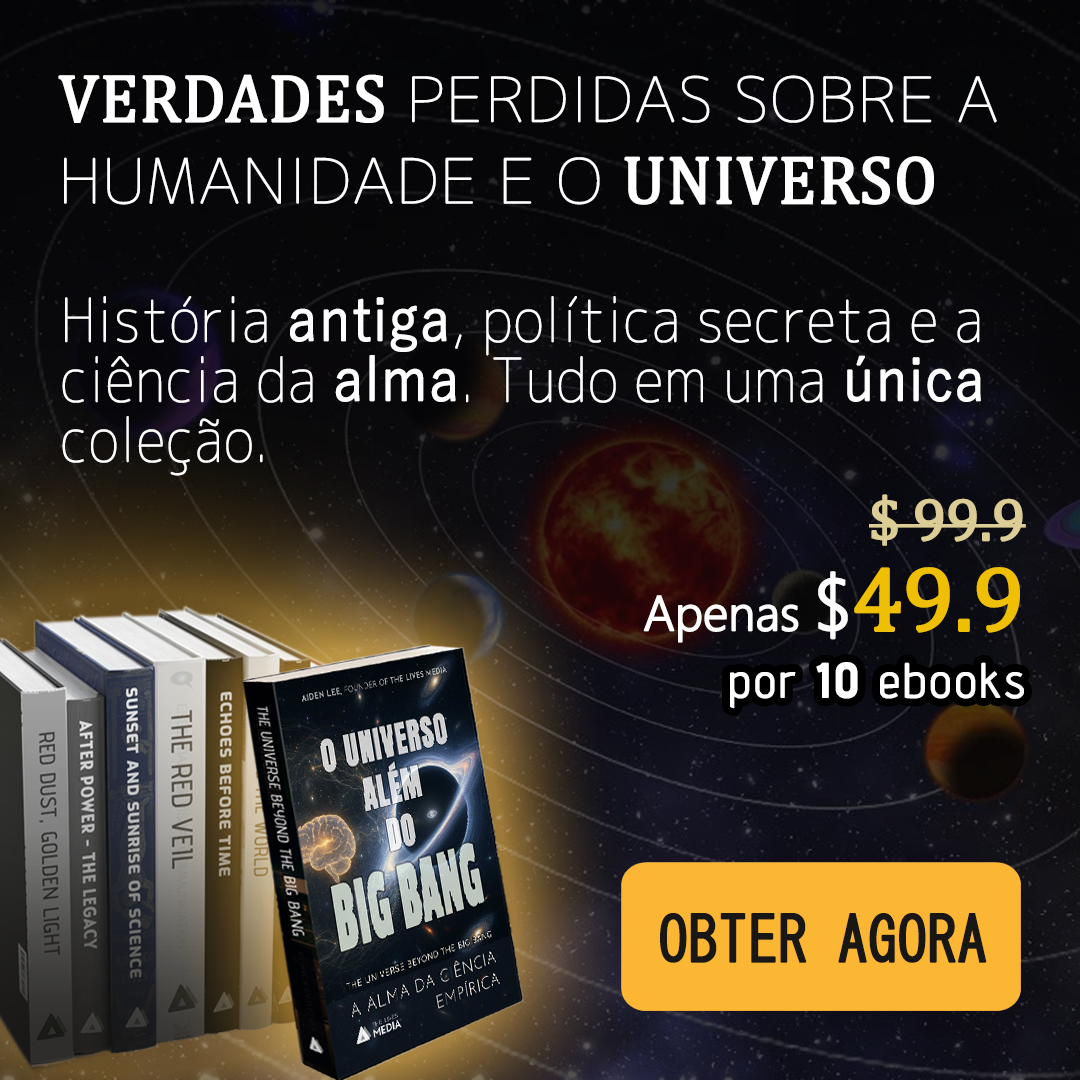
<style>
.page{position:relative;width:1080px;height:1080px}
.page>*{position:absolute;margin:0}
.t1{font:61.2px "Chogokuboso-Gothic";letter-spacing:0.005em;color:#ffffff;font-weight:bold;scale:1.07 1}
.t2{font:68px "Cambria";letter-spacing:0.005em;color:#ffffff;font-weight:bold;scale:0.96 1}
.t3{font:60px/60px "Chogokuboso-Gothic";letter-spacing:0.005em;color:#ffffff;font-weight:bold;scale:0.9 1}
.t4{font:60px/60px "YuGothic-Regular";letter-spacing:0.005em;color:#ffffff;font-weight:bold;scale:0.9 1}
.t5{font:60px "Cambria";letter-spacing:-0.025em;color:#dbcd95;font-weight:bold}
.t6{font:60px "Cambria";letter-spacing:-0.025em;color:#efbf04;font-weight:bold}
.t7{font:48px "MalgunGothic-Semilight";letter-spacing:-0.025em;color:#ffffff;font-weight:bold}
.t8{font:72px "MalgunGothic-Semilight";letter-spacing:-0.025em;color:#ffffff;font-weight:bold}
.t9{font:92px "Cambria";letter-spacing:-0.025em;color:#efbf04;font-weight:bold}
.t10{font:48px "AdventPro-Regular";letter-spacing:0.05em;color:#ffffff;font-weight:bold}
.t11{font:48px "AdventPro-Bold";letter-spacing:0.05em;color:#ffffff;font-weight:bold}
.t12{font:63px "MS-Gothic";color:#191616;font-weight:bold;scale:0.9 1}
</style>
<div class="page">
<p class="t1" style="left:58px;top:74px;width:939px;height:131px"><span class="t2">VERDADES </span>PERDIDAS SOBRE A HUMANIDADE E O <span class="t2">UNIVERSO</span></p>
<p class="t3" style="left:62px;top:296px;width:919px;height:180px">História <span class="t4">antiga</span>, política secreta e a ciência da <span class="t4">alma</span>. Tudo em uma <span class="t4">única </span>coleção.</p>
<p class="t5" style="left:869px;top:494px;width:157px;height:52px"><span class="t6"> </span>$ 99.9</p>
<p class="t7" style="left:643px;top:567px;width:377px;height:76px">Apenas <span class="t8">$</span><span class="t9">49.9</span></p>
<p class="t10" style="left:730px;top:662px;width:294px;height:47px">por <span class="t11">10</span> ebooks</p>
<p class="t12" style="left:660px;top:913px;width:327px;height:50px">OBTER AGORA</p>
</div>
